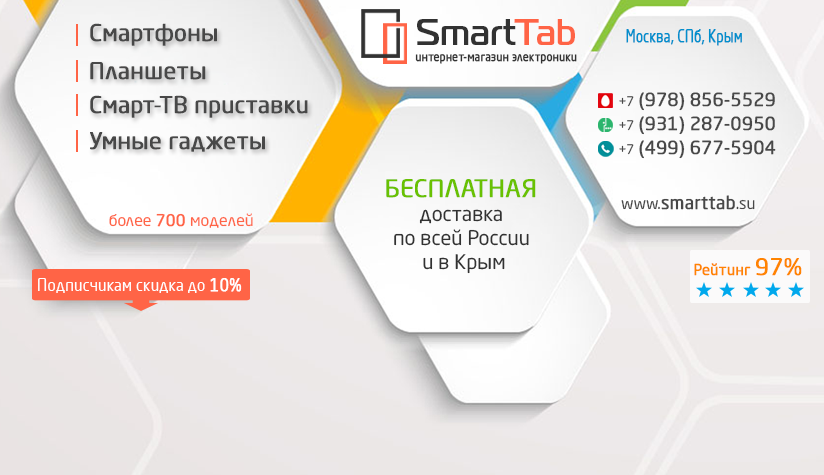
<style>
.page{position:relative;width:824px;height:475px}
.page>*{position:absolute;margin:0}
.t1{font:22.9px "NeoSansCyr-Regular";color:#484848;font-weight:bold}
.t2{font:36.4px "MagistralC-Bold";color:#323232}
.t3{font:36.4px "MagistralC-Bold";color:#ff6446}
.t4{font:17.2px "NeoSansCyr-Regular";color:#018fcc;font-weight:bold;scale:0.75 1}
.t5{font:12px "NeoSansCyr-Regular";color:#323232;font-weight:bold;scale:0.89 1}
.t6{font:18px/24px "NeoSansCyr-Regular";color:#484848;font-weight:bold}
.t7{font:12.9px/24px "NeoSansCyr-Regular";color:#484848}
.t8{font:20px "NeoSansCyr-Regular";color:#323232}
.t9{font:24px "NeoSansCyr-Regular";color:#69c102;font-weight:bold}
.t10{font:18px "NeoSansCyr-Regular";color:#484848;font-weight:bold}
.t11{font:16px "NeoSansCyr-Regular";color:#484848}
.t12{font:15.9px "NeoSansCyr-Regular";color:#ff6446}
.t13{font:15.9px "NeoSansCyr-Regular";color:#ff6446;font-weight:bold}
.t14{font:15px "NeoSansCyr-Regular";color:#ff8400;font-weight:bold;scale:0.97 1}
.t15{font:22.7px "NeoSansCyr-Regular";color:#ff8400;font-weight:bold}
.t16{font:16.8px "NeoSansCyr-Regular";color:#ffffff;scale:0.92 1}
.t17{font:16.8px "NeoSansCyr-Regular";color:#ffffff;font-weight:bold;scale:0.92 1}
</style>
<div class="page">
<p class="t1" style="left:90px;top:23px;width:127px;height:23px">Смартфоны</p>
<p class="t2" style="left:417px;top:19px;width:158px;height:26px">Smart<span class="t3">Tab</span></p>
<p class="t4" style="left:626px;top:29px;width:116px;height:17px">Москва, СПб, Крым</p>
<p class="t5" style="left:415px;top:54px;width:162px;height:10px">интернет-магазин электроники</p>
<p class="t1" style="left:90px;top:62px;width:116px;height:18px">Планшеты</p>
<p class="t1" style="left:90px;top:95px;width:218px;height:23px">Смарт-ТВ приставки</p>
<p class="t6" style="left:619px;top:92px;width:157px;height:67px"><span class="t7">+7 </span>(978) 856-5529<br><span class="t7">+7 </span>(931) 287-0950<br><span class="t7">+7 </span>(499) 677-5904</p>
<p class="t1" style="left:90px;top:132px;width:175px;height:20px">Умные гаджеты</p>
<p class="t8" style="left:386px;top:179px;width:150px;height:95px;text-align:center"><span class="t9">БЕСПЛАТНАЯ <br></span>доставка <br>по всей России <br>и в Крым</p>
<p class="t10" style="left:621px;top:195px;width:134px;height:15px"><span class="t11">www.</span>smarttab<span class="t11">.su</span></p>
<p class="t12" style="left:109px;top:213px;width:144px;height:15px">более <span class="t13">700 </span>моделей</p>
<p class="t14" style="left:694px;top:263px;width:57px;height:13px">Рейтинг</p>
<p class="t15" style="left:756px;top:258px;width:46px;height:18px">97%</p>
<p class="t16" style="left:38px;top:278px;width:204px;height:15px">Подписчикам скидка до<span class="t17"> 10%</span></p>
</div>
